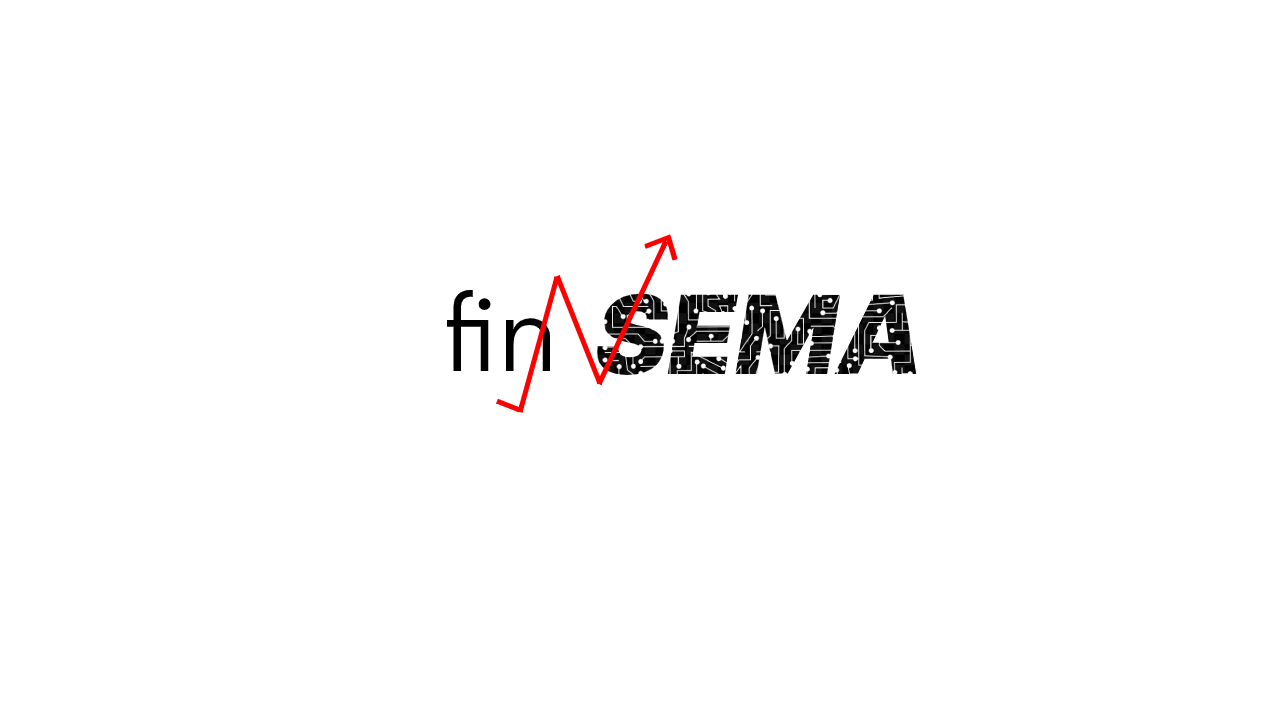
<style>
.page{position:relative;width:1280px;height:720px;background:#ffffff}
.page>*{position:absolute;margin:0}
.t1{font:109px "DidactGothic-Regular";color:#000000}
.t2{font:109px "InterUI-BlackItalic";color:#000000}
</style>
<div class="page">
<p class="t1" style="left:447px;top:290px;width:104px;height:81px">fin</p>
<p class="t2" style="left:596px;top:293px;width:321px;height:82px">SEMA</p>
</div>
